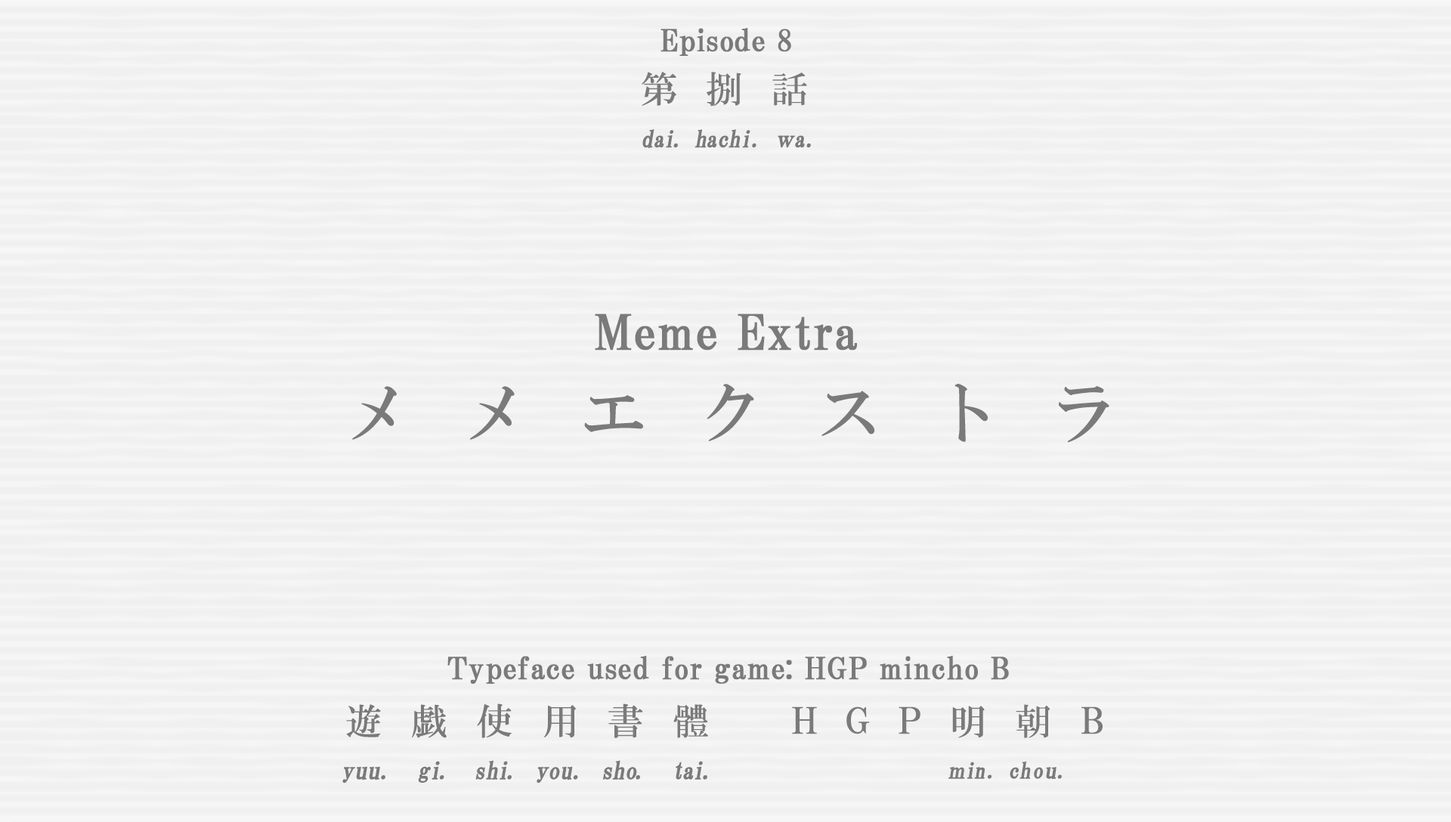
<style>
.page{position:relative;width:1451px;height:822px;background:#f0f0f0}
.page>*{position:absolute;margin:0}
.t1{font:30.2px "HGPMinchoB";letter-spacing:0.01em;color:#7a7a7a;font-weight:bold}
.t2{font:36.5px "HGMinchoB";letter-spacing:0.79em;color:#7a7a7a}
.t3{font:23.2px "HGMinchoB";letter-spacing:-0.02em;color:#7a7a7a;font-weight:bold;scale:0.96 1}
.t4{font:23.2px "HGMinchoB";color:#7a7a7a;font-weight:bold;scale:0.96 1}
.t5{font:23.2px "HGMinchoB";letter-spacing:-0.075em;color:#7a7a7a;font-weight:bold;scale:0.96 1}
.t6{font:23.2px "HGMinchoB";letter-spacing:-0.1em;color:#7a7a7a;font-weight:bold;scale:0.96 1}
.t7{font:23.2px "HGMinchoB";letter-spacing:0.07em;color:#7a7a7a;font-weight:bold;scale:0.96 1}
.t8{font:23.2px "HGMinchoB";letter-spacing:-0.05em;color:#7a7a7a;font-weight:bold;scale:0.86 1}
.t9{font:48.4px "HGPMinchoB";letter-spacing:0.01em;color:#7a7a7a;font-weight:bold}
.t10{font:65.7px "HGMinchoB";letter-spacing:0.79em;color:#7a7a7a}
.t11{font:36.3px "HGMinchoB";letter-spacing:0.81em;color:#7a7a7a}
.t12{font:36.3px "HGMinchoB";letter-spacing:0.8em;color:#7a7a7a}
.t13{font:36.3px "HGMinchoB";letter-spacing:0.79em;color:#7a7a7a}
.t14{font:36.3px "HGMinchoB";letter-spacing:0.71em;color:#7a7a7a;scale:0.85 1}
.t15{font:36.3px "HGMinchoB";letter-spacing:0.53em;color:#7a7a7a}
.t16{font:24.2px "HGMinchoB";color:#7a7a7a;font-weight:bold}
.t17{font:24.2px "HGMinchoB";letter-spacing:0.025em;color:#7a7a7a;font-weight:bold;scale:0.96 1}
.t18{font:24.2px "HGMinchoB";letter-spacing:0.075em;color:#7a7a7a;font-weight:bold;scale:0.96 1}
.t19{font:24.2px "HGMinchoB";letter-spacing:-0.025em;color:#7a7a7a;font-weight:bold;scale:0.96 1}
.t20{font:24.2px "HGMinchoB";letter-spacing:-0.11em;color:#7a7a7a;font-weight:bold;scale:0.96 1}
.t21{font:24.2px "HGMinchoB";color:#7a7a7a;font-weight:bold;scale:0.96 1}
.t22{font:24.2px "HGMinchoB";letter-spacing:-0.05em;color:#7a7a7a;font-weight:bold;scale:0.96 1}
.t23{font:24.2px "HGMinchoB";letter-spacing:-0.12em;color:#7a7a7a;font-weight:bold;scale:0.96 1}
.t24{font:24.2px "HGMinchoB";letter-spacing:-0.01em;color:#7a7a7a;font-weight:bold;scale:0.96 1}
.t25{font:24.2px "HGMinchoB";letter-spacing:0.005em;color:#7a7a7a;font-weight:bold;scale:0.96 1}
.t26{font:24.2px "HGMinchoB";letter-spacing:-0.09em;color:#7a7a7a;font-weight:bold;scale:0.96 1}
.t27{font:24.2px "HGMinchoB";letter-spacing:-0.075em;color:#7a7a7a;font-weight:bold;scale:0.96 1}
.t28{font:24.2px "HGMinchoB";letter-spacing:-0.1em;color:#7a7a7a;font-weight:bold;scale:0.96 1}
.t29{font:22px "HGMinchoB";letter-spacing:0.07em;color:#7a7a7a;font-weight:bold;scale:0.96 1}
.t30{font:22px "HGMinchoB";letter-spacing:-0.075em;color:#7a7a7a;font-weight:bold;scale:0.83 1}
.t31{font:22px "HGMinchoB";letter-spacing:-0.075em;color:#7a7a7a;font-weight:bold;scale:0.96 1}
.t32{font:22px "HGMinchoB";color:#7a7a7a;font-weight:bold;scale:0.96 1}
.t33{font:22px "HGMinchoB";letter-spacing:0.05em;color:#7a7a7a;font-weight:bold;scale:0.96 1}
.t34{font:22px "HGMinchoB";letter-spacing:0.01em;color:#7a7a7a;font-weight:bold;scale:1.06 1}
</style>
<div class="page">
<p class="t1" style="left:660px;top:28px;width:131px;height:28px">Episode 8</p>
<p class="t2" style="left:641px;top:72px;width:166px;height:35px">第捌話</p>
<p class="t3" style="left:642px;top:129px;width:169px;height:19px"><span class="t4">d</span><span class="t5">a</span><span class="t6">i</span><span class="t7">. </span>hachi<span class="t7">. </span><span class="t8">ｗ</span><span class="t4">a</span><span class="t7">.</span></p>
<p class="t9" style="left:595px;top:314px;width:262px;height:37px">Meme Extra</p>
<p class="t10" style="left:352px;top:384px;width:757px;height:59px">メメエクストラ</p>
<p class="t1" style="left:447px;top:656px;width:562px;height:28px">Typeface used for game: HGP mincho B</p>
<p class="t11" style="left:346px;top:703px;width:362px;height:35px">遊<span class="t12">戯</span>使<span class="t13">用</span>書體</p>
<p class="t14" style="left:792px;top:706px;width:310px;height:28px">ＨＧＰ    Ｂ</p>
<p class="t13" style="left:952px;top:704px;width:97px;height:34px">明<span class="t15">朝</span></p>
<p class="t16" style="left:342px;top:760px;width:365px;height:23px"><span class="t17">y</span>uu<span class="t18">. </span><span class="t19">g</span><span class="t20">i</span><span class="t18">. </span><span class="t21">s</span><span class="t22">h</span><span class="t23">i</span><span class="t18">. </span><span class="t24">y</span><span class="t25">ou</span><span class="t18">. </span><span class="t19">s</span><span class="t21">h</span><span class="t26">o</span><span class="t18">.  </span><span class="t27">t</span><span class="t28">ai</span><span class="t18">.</span></p>
<p class="t29" style="left:948px;top:761px;width:114px;height:19px"><span class="t30">ｍ</span><span class="t31">i</span>n. <span class="t32">c</span>h<span class="t33">o</span><span class="t34">u</span>.</p>
</div>
